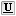
<style>
.page{position:relative;width:16px;height:16px;background:#ffffff}
.page>*{position:absolute;margin:0}
.t1{font:11px "TimesNewRomanPS-BoldMT";color:#000000}
</style>
<div class="page">
<p class="t1" style="left:4px;top:3px;width:8px;height:8px">U</p>
</div>
